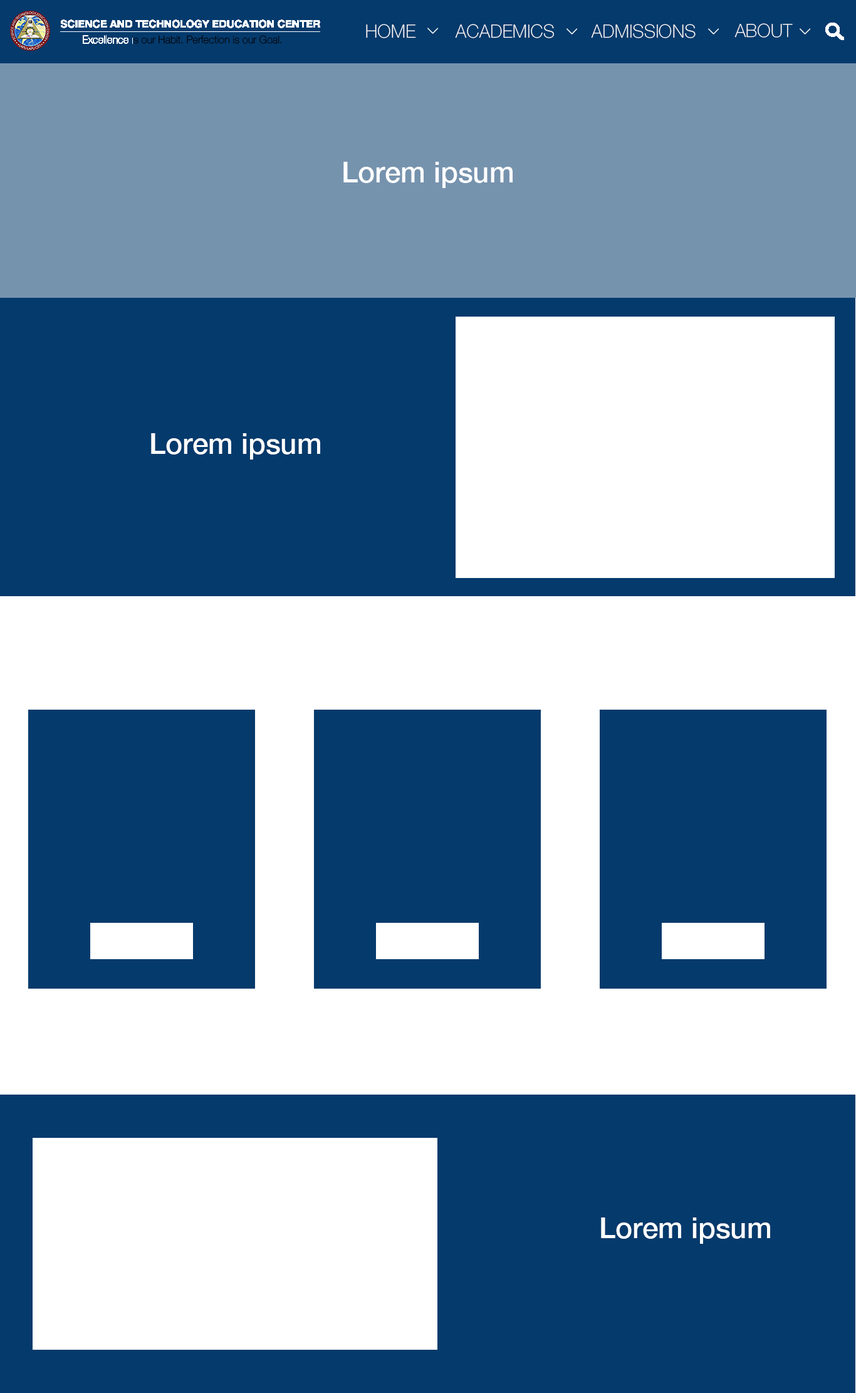
<style>
.page{position:relative;width:856px;height:1393px;background:#053a6c}
.page>*{position:absolute;margin:0}
.t1{font:18.3px "HelveticaNeue-Thin";color:#ffffff}
.t2{font:28.7px "HelveticaNeue-Medium";color:#ffffff}
</style>
<div class="page">
<p class="t1" style="left:366px;top:24px;width:50px;height:14px">HOME</p>
<p class="t1" style="left:455px;top:24px;width:99px;height:14px">ACADEMICS</p>
<p class="t1" style="left:591px;top:24px;width:105px;height:14px">ADMISSIONS</p>
<p class="t1" style="left:735px;top:23px;width:58px;height:15px">ABOUT</p>
<p class="t2" style="left:343px;top:162px;width:170px;height:26px">Lorem ipsum</p>
<p class="t2" style="left:151px;top:433px;width:169px;height:26px">Lorem ipsum</p>
<p class="t2" style="left:601px;top:1217px;width:169px;height:27px">Lorem ipsum</p>
</div>
